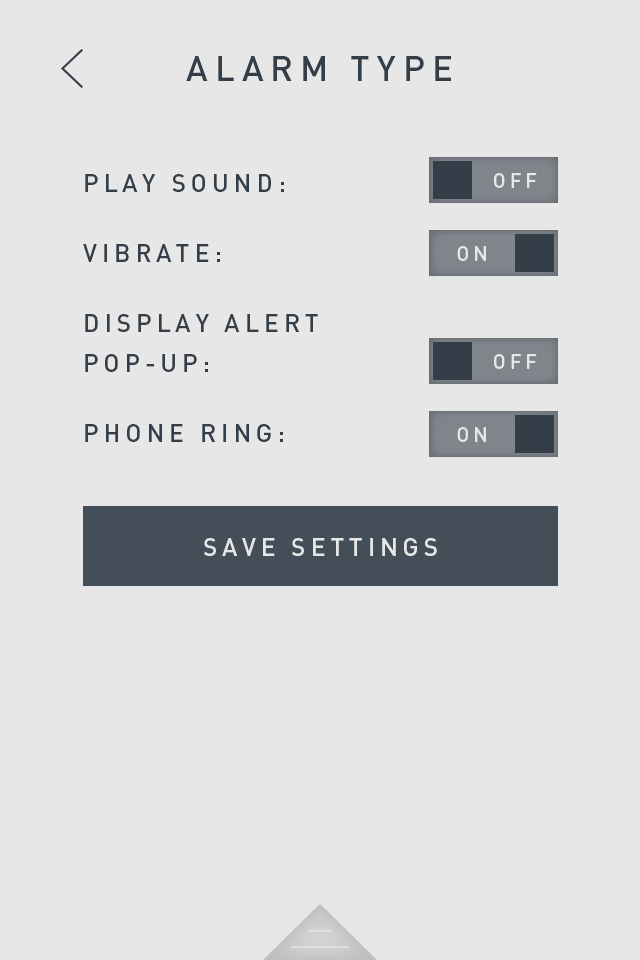
<style>
.page{position:relative;width:640px;height:960px;background:#e8e7e8}
.page>*{position:absolute;margin:0}
.t1{font:35px "DINPro-Medium";letter-spacing:0.2em;color:#333e48}
.t2{font:25px/70px "DINPro-Medium";letter-spacing:0.2em;color:#333e48}
.t3{font:25px/40px "DINPro-Medium";letter-spacing:0.2em;color:#333e48}
.t4{font:20.3px "DINPro-Medium";letter-spacing:0.2em;color:#e8e7e8}
.t5{font:25.2px/106.3px "DINPro-Medium";letter-spacing:0.2em;color:#e8e7e8}
.t6{font:25.3px/106.3px "DINPro-Medium";letter-spacing:0.2em;color:#e8e7e8}
</style>
<div class="page">
<p class="t1" style="left:186px;top:56px;width:265px;height:25px">ALARM TYPE</p>
<p class="t2" style="left:83px;top:174px;width:235px;height:268px">PLAY SOUND:<br>VIBRATE:<br>DISPLAY ALERT <br><span class="t3">POP-UP:<br></span>PHONE RING:</p>
<p class="t4" style="left:494px;top:173px;width:43px;height:15px">OFF</p>
<p class="t4" style="left:457px;top:246px;width:29px;height:15px">ON</p>
<p class="t4" style="left:494px;top:354px;width:43px;height:15px">OFF</p>
<p class="t4" style="left:457px;top:427px;width:29px;height:15px">ON</p>
<p class="t5" style="left:204px;top:538px;width:233px;height:18px;text-align:center">SAVE SETTINGS<br><span class="t6">ISCH</span></p>
</div>
